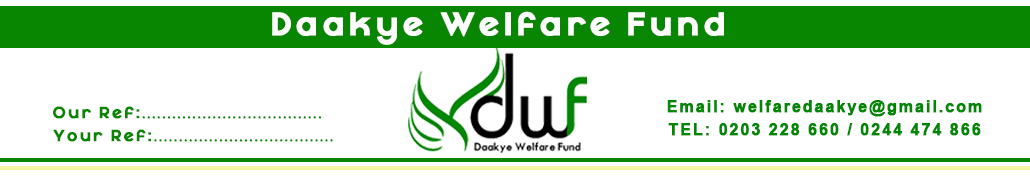
<style>
.page{position:relative;width:1030px;height:180px;background:#ffffff}
.page>*{position:absolute;margin:0}
.t1{font:32.1px "MayekaBoldDemo";letter-spacing:0.1em;color:#ffffff;font-weight:bold}
.t2{font:16px "Arial-BoldMT";letter-spacing:0.1em;color:#028704;font-weight:bold}
.t3{font:16px "LittleAtom";letter-spacing:0.1em;color:#088501;font-weight:bold}
.t4{font:16px "MayekaBoldDemo";letter-spacing:0.1em;color:#088501;font-weight:bold}
</style>
<div class="page">
<p class="t1" style="left:272px;top:11px;width:452px;height:34px">Daakye Welfare Fund</p>
<p class="t2" style="left:667px;top:100px;width:315px;height:17px">Email: welfaredaakye@gmail.com</p>
<p class="t3" style="left:53px;top:106px;width:269px;height:13px"><span class="t4">Our Ref:</span>....................................</p>
<p class="t2" style="left:668px;top:123px;width:313px;height:13px">TEL: 0203 228 660 / 0244 474 866</p>
<p class="t3" style="left:53px;top:129px;width:280px;height:13px"><span class="t4">Your Ref:</span>....................................</p>
</div>
